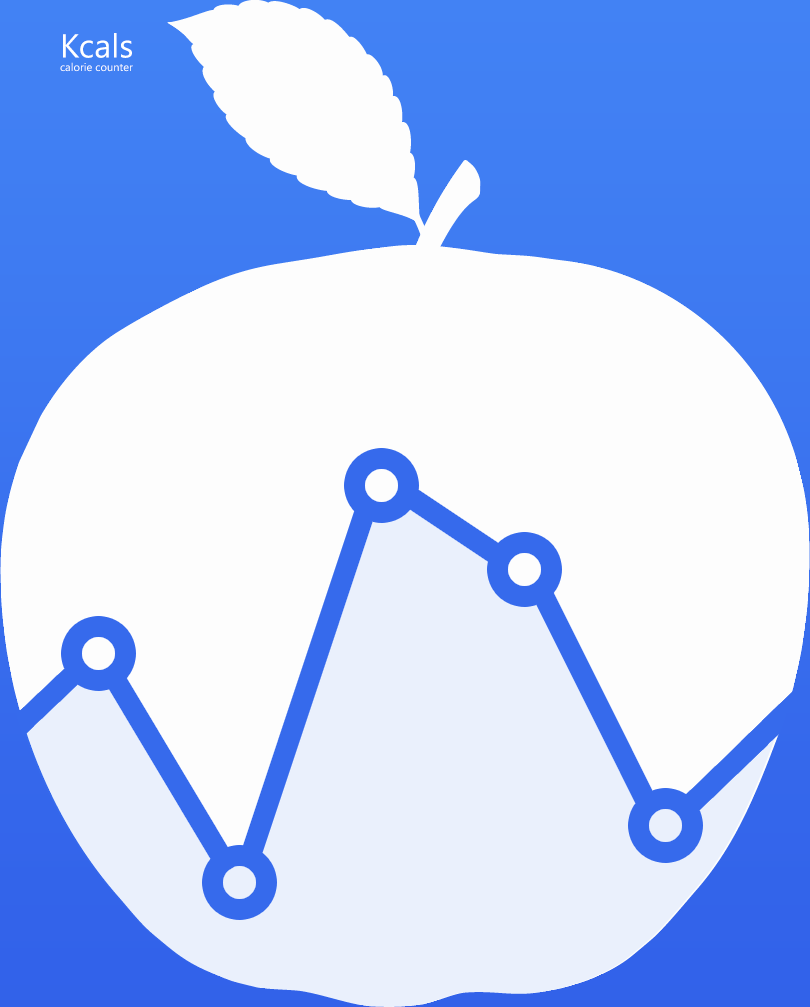
<style>
.page{position:relative;width:810px;height:1007px;background:#fdfdfd}
.page>*{position:absolute;margin:0}
.t1{font:11.1px "SegoeWP";color:#ffffff}
.t2{font:33.2px "SegoeWP";color:#ffffff}
</style>
<div class="page">
<p class="t1" style="left:60px;top:33px;width:73px;height:39px"><span class="t2">Kcals<br></span>calorie counter</p>
</div>
